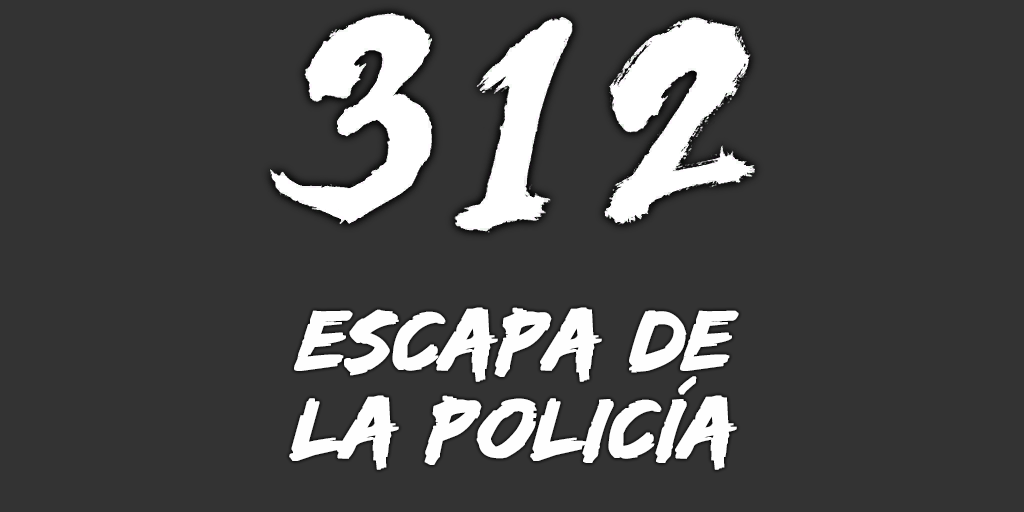
<style>
.page{position:relative;width:1024px;height:512px;background:#333333}
.page>*{position:absolute;margin:0}
.t1{font:88px/88px "EdoSZ";color:#fefefe;font-weight:bold;font-style:italic;scale:1.04 1}
</style>
<div class="page">
<p class="t1" style="left:289px;top:307px;width:450px;height:163px;text-align:center">escapa de<br>la policía</p>
</div>
